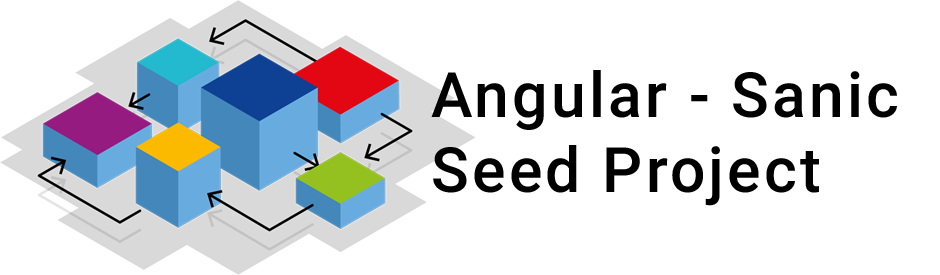
<style>
.page{position:relative;width:940px;height:275px;background:#ffffff}
.page>*{position:absolute;margin:0}
.t1{font:62.5px "Roboto-Medium";letter-spacing:0.05em;color:#000000}
</style>
<div class="page">
<p class="t1" style="left:431px;top:70px;width:466px;height:136px">Angular - Sanic<br>Seed Project</p>
</div>
